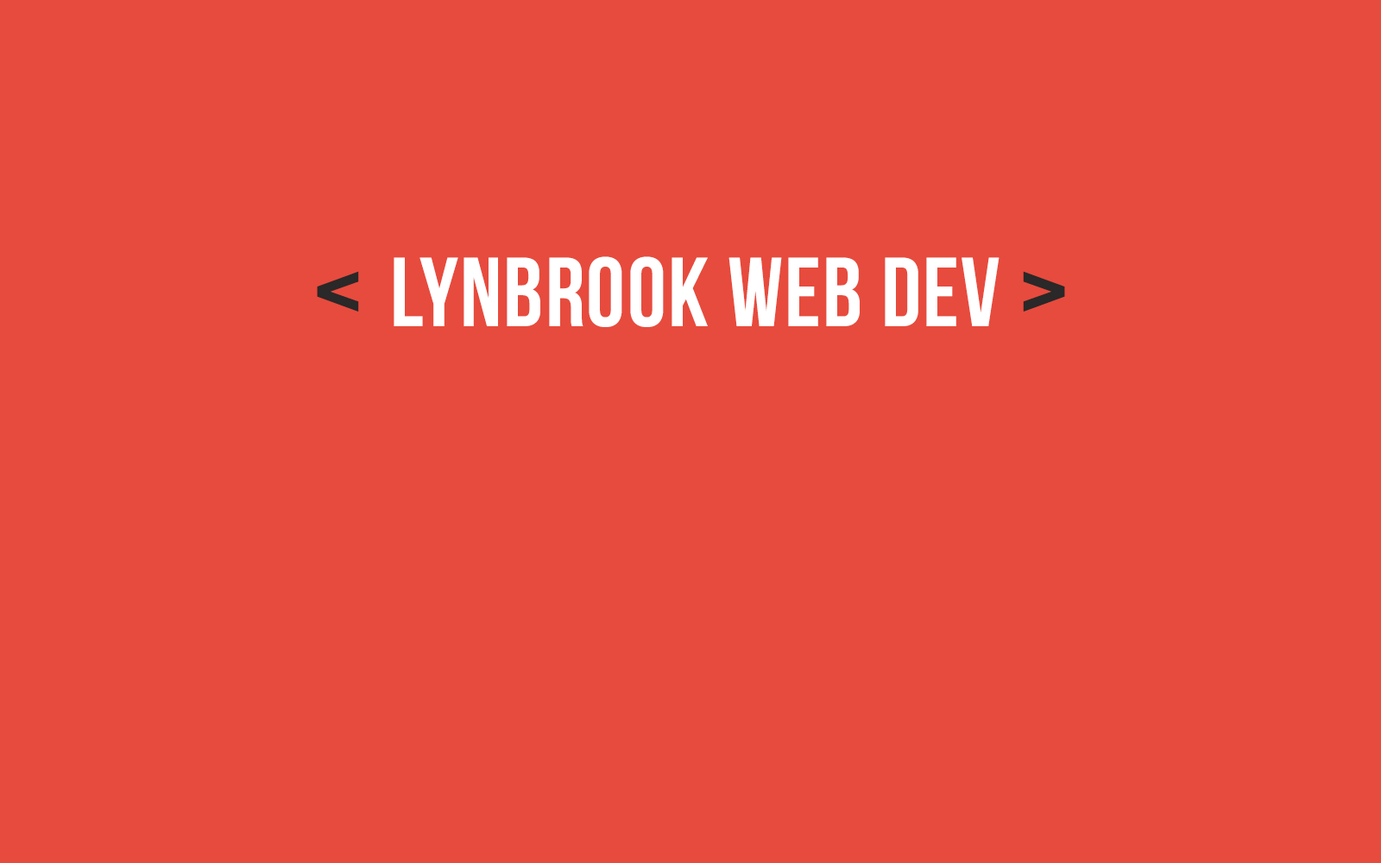
<style>
.page{position:relative;width:1381px;height:863px;background:#e74b3d}
.page>*{position:absolute;margin:0}
.t1{font:98.2px "BebasNeue";letter-spacing:0.02em;color:#ffffff}
.t2{font:125.8px "BebasNeue";letter-spacing:0.02em;color:#2a2828}
</style>
<div class="page">
<p class="t1" style="left:394px;top:256px;width:606px;height:71px">lynbrook web dev</p>
<p class="t2" style="left:317px;top:271px;width:42px;height:41px">&lt;</p>
<p class="t2" style="left:1023px;top:271px;width:42px;height:41px;rotate:180deg">&lt;</p>
</div>
